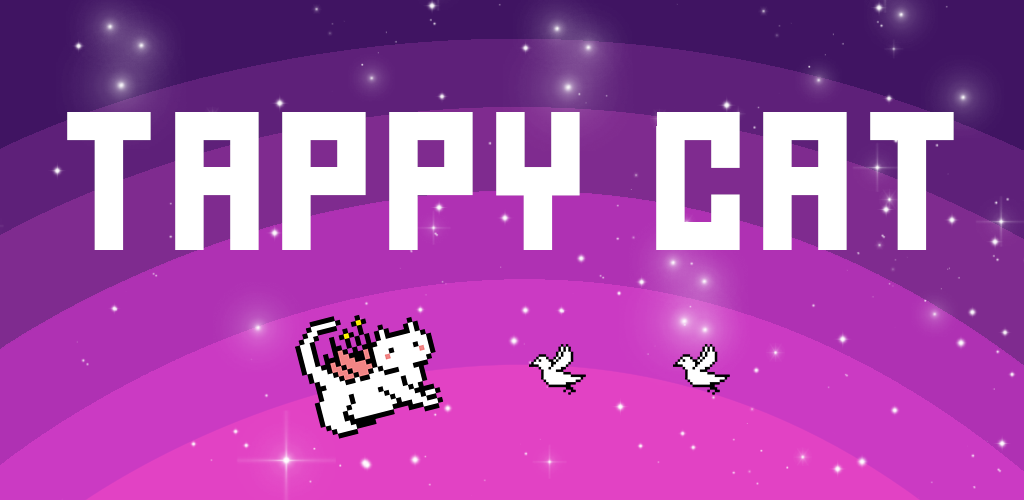
<style>
.page{position:relative;width:1024px;height:500px}
.page>*{position:absolute;margin:0}
.t1{font:110px "FFFForward";letter-spacing:0.1em;color:#ffffff}
</style>
<div class="page">
<p class="t1" style="left:67px;top:112px;width:887px;height:138px">TAPPY CAT</p>
</div>
